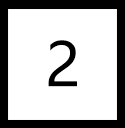
<style>
.page{position:relative;width:125px;height:128px;background:#ffffff}
.page>*{position:absolute;margin:0}
.t1{font:60px "MicrosoftYaHei";color:#000000}
</style>
<div class="page">
<p class="t1" style="left:48px;top:40px;width:29px;height:47px">2</p>
</div>
